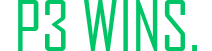
<style>
.page{position:relative;width:212px;height:51px;background:#ffffff}
.page>*{position:absolute;margin:0}
.t1{font:66.7px "AgencyFB-Reg";color:#00c566}
</style>
<div class="page">
<p class="t1" style="left:18px;top:0px;width:179px;height:51px">P3 WINS.</p>
</div>
